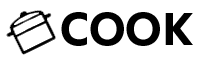
<style>
.page{position:relative;width:200px;height:60px;background:#ffffff}
.page>*{position:absolute;margin:0}
.t1{font:48px "QuietSans-Bold";color:#000000}
</style>
<div class="page">
<p class="t1" style="left:61px;top:12px;width:132px;height:34px">COOK</p>
</div>
